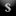
<style>
.page{position:relative;width:16px;height:16px;background:#000000}
.page>*{position:absolute;margin:0}
.t1{font:10px "Nelson-Bold"}
</style>
<div class="page">
<p class="t1" style="left:5px;top:3px;width:6px;height:9px">S</p>
</div>
